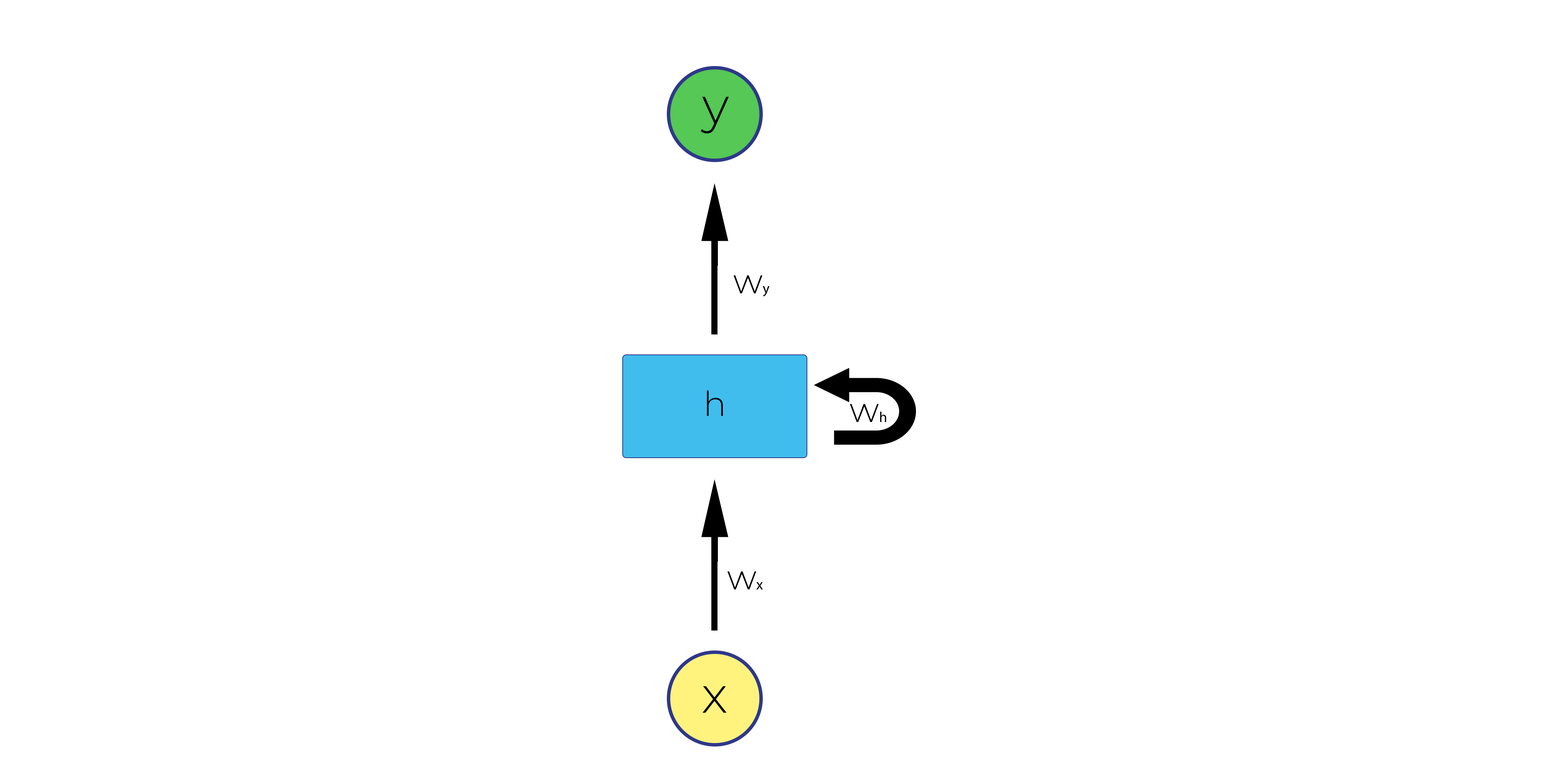
<style>
.page{position:relative;width:1554px;height:768px;background:#ffffff}
.page>*{position:absolute;margin:0}
.t1{font:50.7px "Montserrat-Light";color:#010000}
.t2{font:34.2px "Montserrat-Light";color:#010000}
.t3{font:14.6px "MyriadPro-Regular";color:#010000}
</style>
<div class="page">
<p class="t1" style="left:700px;top:97px;width:29px;height:37px">y</p>
<p class="t2" style="left:733px;top:275px;width:36px;height:21px">w<span class="t3">y</span></p>
<p class="t2" style="left:707px;top:390px;width:16px;height:26px">h</p>
<p class="t2" style="left:849px;top:404px;width:37px;height:18px">w<span class="t3">h</span></p>
<p class="t2" style="left:727px;top:571px;width:36px;height:18px">w<span class="t3">x</span></p>
<p class="t1" style="left:702px;top:686px;width:24px;height:26px">x</p>
</div>
